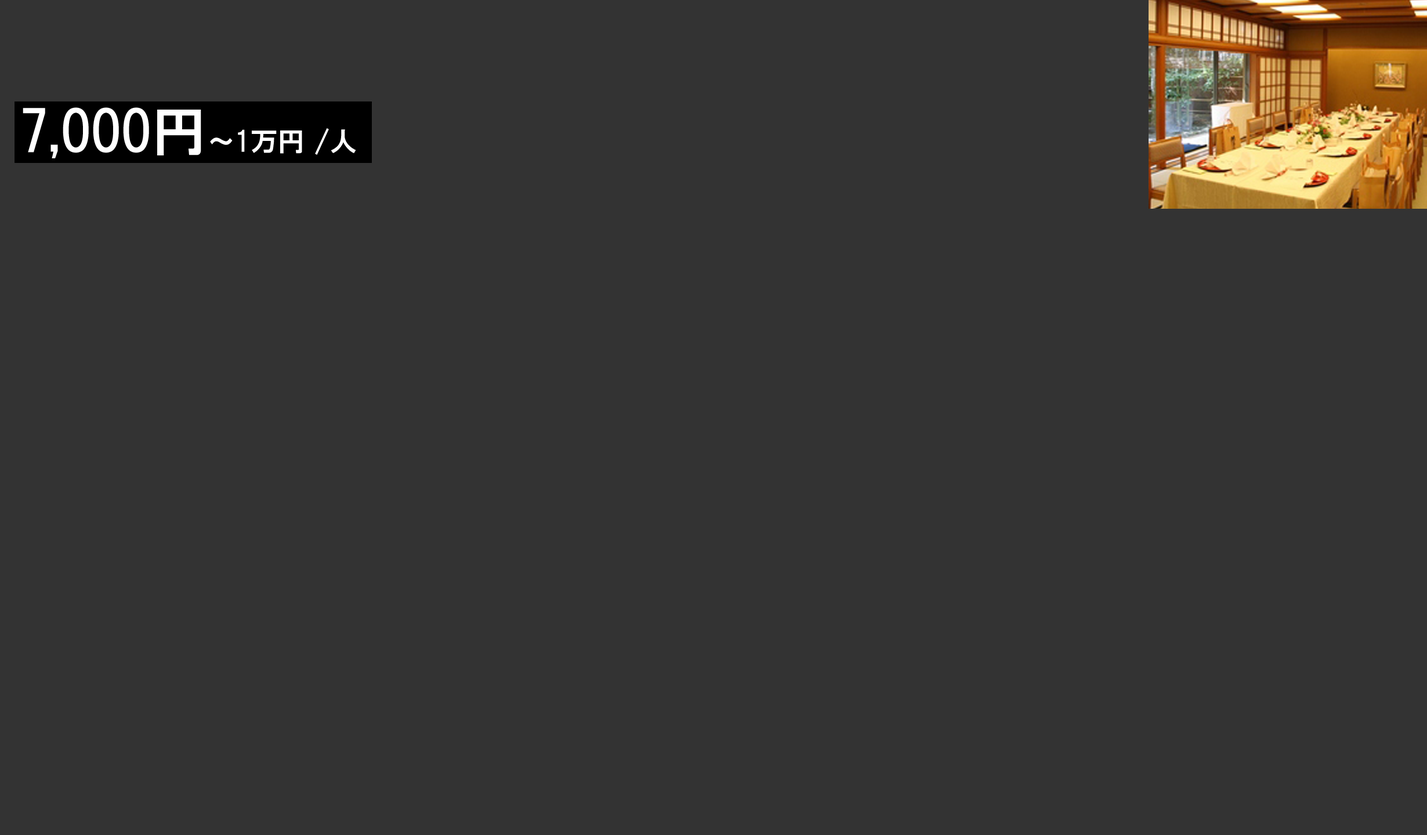
<style>
.page{position:relative;width:1427px;height:835px;background:#333333}
.page>*{position:absolute;margin:0}
.t1{font:27.7px "HGSGothicE";color:#ffffff}
.t2{font:55.5px "HGSGothicE";color:#ffffff}
</style>
<div class="page">
<p class="t1" style="left:23px;top:107px;width:333px;height:51px"><span class="t2">7,000円</span>～1万円 /人</p>
</div>
